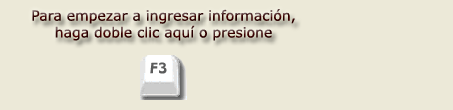
<style>
.page{position:relative;width:453px;height:110px;background:#ece9d8}
.page>*{position:absolute;margin:0}
.t1{font:14px "Verdana"}
</style>
<div class="page">
<p class="t1" style="left:32px;top:9px;width:263px;height:32px;text-align:center">Para empezar a ingresar información, <br>haga doble clic aquí o presione</p>
</div>
